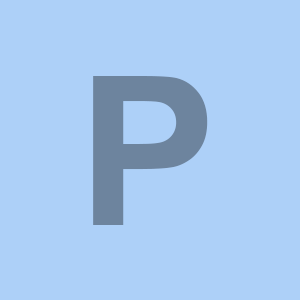
<style>
.page{position:relative;width:300px;height:300px;background:#add0f8}
.page>*{position:absolute;margin:0}
.t1{font:208.3px "Arial-BoldMT";letter-spacing:0.05em;color:#6d849e}
</style>
<div class="page">
<p class="t1" style="left:93px;top:76px;width:115px;height:149px">P</p>
</div>
